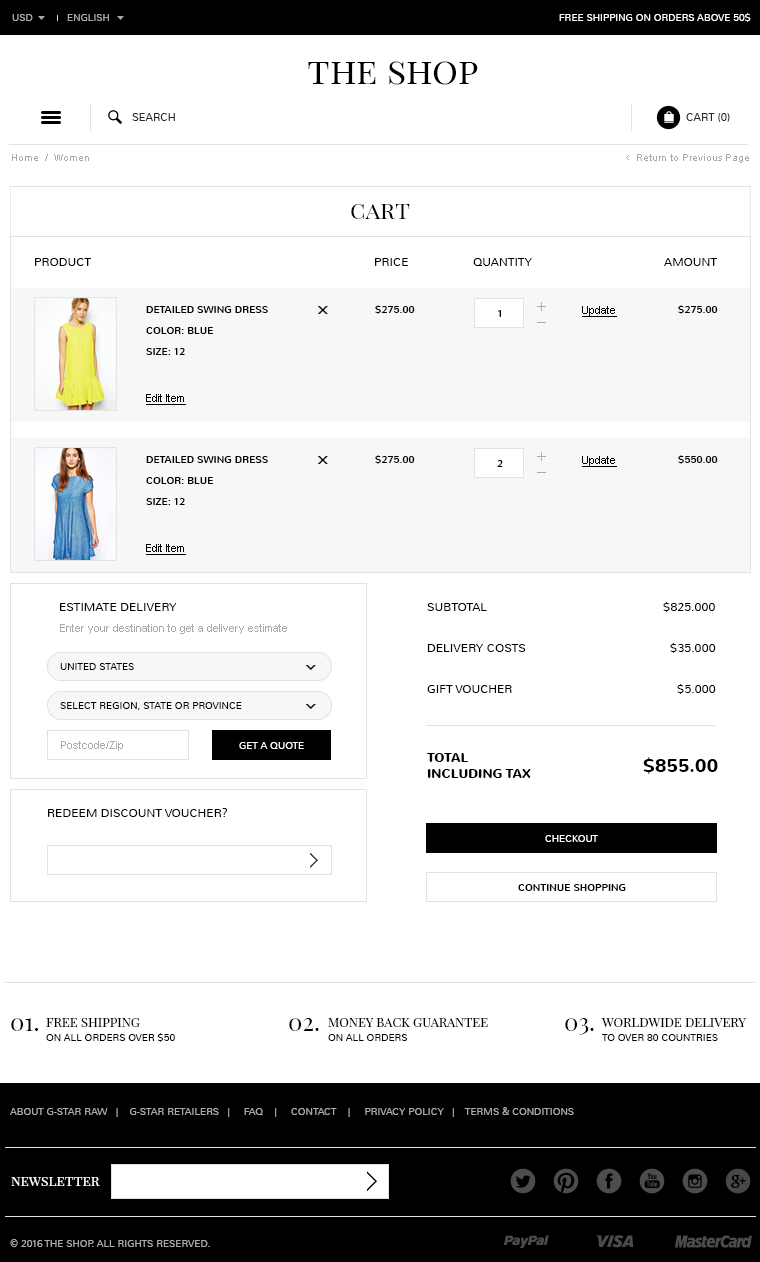
<style>
.page{position:relative;width:760px;height:1262px;background:#ffffff}
.page>*{position:absolute;margin:0}
.t1{font:10px "Nunito-Light";color:#aaaaaa;text-transform:uppercase}
.t2{font:10px "Nunito-Light";color:#ffffff;text-transform:uppercase}
.t3{font:36px "PlayfairDisplaySC-Regular";color:#000000}
.t4{font:11px "Nunito-Light";color:#282828;text-transform:uppercase}
.t5{font:10px "ArialMT";color:#aaaaaa}
.t6{font:12px "Cabin-Regular";color:#aaaaaa}
.t7{font:24px "PlayfairDisplaySC-Regular";color:#000000}
.t8{font:12px "Nunito-Light";color:#000000;text-transform:uppercase}
.t9{font:10px "Nunito-Regular";color:#000000;text-transform:uppercase}
.t10{font:10px "Nunito-Regular";color:#000000}
.t11{font:11px "ArialMT";color:#000000;text-decoration:underline}
.t12{font:11px "ArialMT";color:#aaaaaa}
.t13{font:10px "Nunito-Light";color:#000000;text-transform:uppercase}
.t14{font:13px "Nunito-Bold";color:#000000;text-transform:uppercase}
.t15{font:18px "Nunito-Bold";color:#000000;text-transform:uppercase}
.t16{font:13px "PlayfairDisplaySC-Regular";color:#000000;text-transform:uppercase}
.t17{font:14px "PlayfairDisplaySC-Regular";color:#ffffff}
</style>
<div class="page">
<p class="t1" style="left:12px;top:14px;width:21px;height:7px">usD</p>
<p class="t1" style="left:67px;top:14px;width:42px;height:7px">English</p>
<p class="t2" style="left:559px;top:13px;width:192px;height:9px">free shipping on orders above 50$</p>
<p class="t3" style="left:308px;top:61px;width:170px;height:24px">the shop</p>
<p class="t4" style="left:132px;top:113px;width:43px;height:8px">search</p>
<p class="t4" style="left:686px;top:113px;width:44px;height:9px">Cart (0)</p>
<p class="t5" style="left:12px;top:154px;width:77px;height:7px">Home  /  Women</p>
<p class="t6" style="left:626px;top:155px;width:3px;height:5px">&lt;</p>
<p class="t5" style="left:637px;top:154px;width:112px;height:9px">Return to Previous Page</p>
<p class="t7" style="left:351px;top:204px;width:59px;height:15px">cart</p>
<p class="t8" style="left:35px;top:258px;width:56px;height:8px">product</p>
<p class="t8" style="left:375px;top:258px;width:33px;height:8px">price</p>
<p class="t8" style="left:473px;top:258px;width:59px;height:8px">quantity</p>
<p class="t8" style="left:664px;top:258px;width:53px;height:8px">amount</p>
<p class="t9" style="left:375px;top:305px;width:40px;height:9px">$275.00</p>
<p class="t9" style="left:678px;top:305px;width:40px;height:9px">$275.00</p>
<p class="t9" style="left:146px;top:306px;width:122px;height:7px">detailed swing dress</p>
<p class="t10" style="left:497px;top:310px;width:4px;height:7px">1</p>
<p class="t11" style="left:582px;top:306px;width:35px;height:11px">Update</p>
<p class="t9" style="left:146px;top:327px;width:67px;height:7px">color: blue</p>
<p class="t9" style="left:146px;top:348px;width:39px;height:7px">size: 12</p>
<p class="t11" style="left:146px;top:394px;width:40px;height:11px">Edit Item</p>
<p class="t9" style="left:146px;top:456px;width:122px;height:7px">detailed swing dress</p>
<p class="t9" style="left:375px;top:455px;width:40px;height:9px">$275.00</p>
<p class="t10" style="left:497px;top:460px;width:6px;height:7px">2</p>
<p class="t11" style="left:582px;top:456px;width:35px;height:11px">Update</p>
<p class="t9" style="left:678px;top:455px;width:40px;height:9px">$550.00</p>
<p class="t9" style="left:146px;top:477px;width:67px;height:7px">color: blue</p>
<p class="t9" style="left:146px;top:498px;width:39px;height:7px">size: 12</p>
<p class="t11" style="left:146px;top:544px;width:40px;height:11px">Edit Item</p>
<p class="t8" style="left:60px;top:603px;width:117px;height:8px">estimate Delivery</p>
<p class="t8" style="left:427px;top:603px;width:60px;height:8px">subtotal</p>
<p class="t8" style="left:663px;top:602px;width:52px;height:10px">$825.000</p>
<p class="t12" style="left:60px;top:624px;width:227px;height:10px">Enter your destination to get a delivery estimate</p>
<p class="t8" style="left:427px;top:644px;width:99px;height:8px">delivery costs</p>
<p class="t8" style="left:670px;top:643px;width:46px;height:10px">$35.000</p>
<p class="t13" style="left:60px;top:663px;width:74px;height:7px">united states</p>
<p class="t8" style="left:427px;top:685px;width:85px;height:8px">gift voucher</p>
<p class="t8" style="left:677px;top:684px;width:39px;height:10px">$5.000</p>
<p class="t13" style="left:60px;top:702px;width:182px;height:8px">select region, state or province</p>
<p class="t12" style="left:61px;top:741px;width:62px;height:10px">Postcode/Zip</p>
<p class="t2" style="left:239px;top:742px;width:65px;height:7px">get a quote</p>
<p class="t14" style="left:427px;top:753px;width:104px;height:25px">total<br>including tax</p>
<p class="t15" style="left:643px;top:757px;width:75px;height:17px">$855.00</p>
<p class="t8" style="left:48px;top:808px;width:180px;height:9px">redeem discount voucher?</p>
<p class="t2" style="left:545px;top:835px;width:53px;height:7px">checkout</p>
<p class="t9" style="left:518px;top:884px;width:108px;height:7px">continue shopping</p>
<p class="t7" style="left:11px;top:1018px;width:27px;height:13px">01.</p>
<p class="t16" style="left:46px;top:1018px;width:94px;height:9px">Free Shipping</p>
<p class="t7" style="left:289px;top:1018px;width:30px;height:13px">02.</p>
<p class="t16" style="left:328px;top:1018px;width:160px;height:9px">Money back guarantee</p>
<p class="t7" style="left:565px;top:1018px;width:29px;height:17px">03.</p>
<p class="t16" style="left:601px;top:1018px;width:145px;height:9px">Worldwide Delivery</p>
<p class="t13" style="left:46px;top:1033px;width:129px;height:9px">On all orders over $50</p>
<p class="t13" style="left:328px;top:1034px;width:80px;height:7px">On all orders</p>
<p class="t13" style="left:602px;top:1034px;width:116px;height:7px">To over 80 countries</p>
<p class="t1" style="left:10px;top:1107px;width:564px;height:10px">About G-Star Raw   |    G-Star Retailers   |     FAQ    |     Contact    |     Privacy Policy   |    Terms &amp; Conditions</p>
<p class="t17" style="left:11px;top:1177px;width:89px;height:9px">newsletter</p>
<p class="t1" style="left:10px;top:1239px;width:200px;height:8px">© 2016 the shop. All Rights Reserved.</p>
</div>
